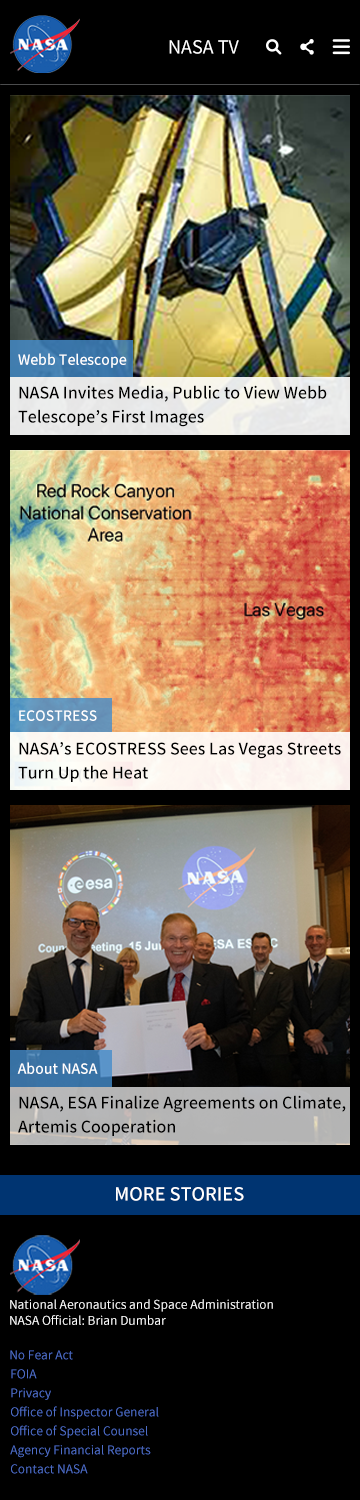
<style>
.page{position:relative;width:360px;height:1500px;background:#000000}
.page>*{position:absolute;margin:0}
.t1{font:18px "NotoSansKR-Regular";color:#ffffff}
.t2{font:14px "NotoSansKR-Medium";color:#ffffff}
.t3{font:16px/24px "NotoSansKR-Medium";color:#000000}
.t4{font:18px "NotoSansKR-Medium";color:#ffffff}
.t5{font:12px/16px "NotoSansKR-Regular";color:#ffffff}
.t6{font:12px "NotoSansKR-Regular";color:#4e6dc6}
</style>
<div class="page">
<p class="t1" style="left:169px;top:40px;width:70px;height:14px">NASA TV</p>
<p class="t2" style="left:18px;top:353px;width:109px;height:15px">Webb Telescope</p>
<p class="t3" style="left:18px;top:385px;width:309px;height:42px">NASA Invites Media, Public to View Webb<br>Telescope’s First Images</p>
<p class="t2" style="left:19px;top:710px;width:78px;height:11px">ECOSTRESS</p>
<p class="t3" style="left:18px;top:742px;width:323px;height:40px">NASA’s ECOSTRESS Sees Las Vegas Streets<br>Turn Up the Heat</p>
<p class="t2" style="left:17px;top:1062px;width:81px;height:12px">About NASA</p>
<p class="t3" style="left:18px;top:1095px;width:328px;height:41px">NASA, ESA Finalize Agreements on Climate,<br>Artemis Cooperation</p>
<p class="t4" style="left:116px;top:1187px;width:128px;height:14px">MORE STORIES</p>
<p class="t5" style="left:10px;top:1299px;width:263px;height:26px">National Aeronautics and Space Administration<br>NASA Official: Brian Dumbar</p>
<p class="t6" style="left:10px;top:1350px;width:63px;height:10px">No Fear Act</p>
<p class="t6" style="left:11px;top:1369px;width:26px;height:10px">FOIA</p>
<p class="t6" style="left:11px;top:1388px;width:40px;height:12px">Privacy</p>
<p class="t6" style="left:11px;top:1406px;width:148px;height:13px">Office of Inspector General</p>
<p class="t6" style="left:11px;top:1425px;width:137px;height:13px">Office of Special Counsel</p>
<p class="t6" style="left:10px;top:1445px;width:141px;height:13px">Agency Financial Reports</p>
<p class="t6" style="left:11px;top:1464px;width:77px;height:10px">Contact NASA</p>
</div>
